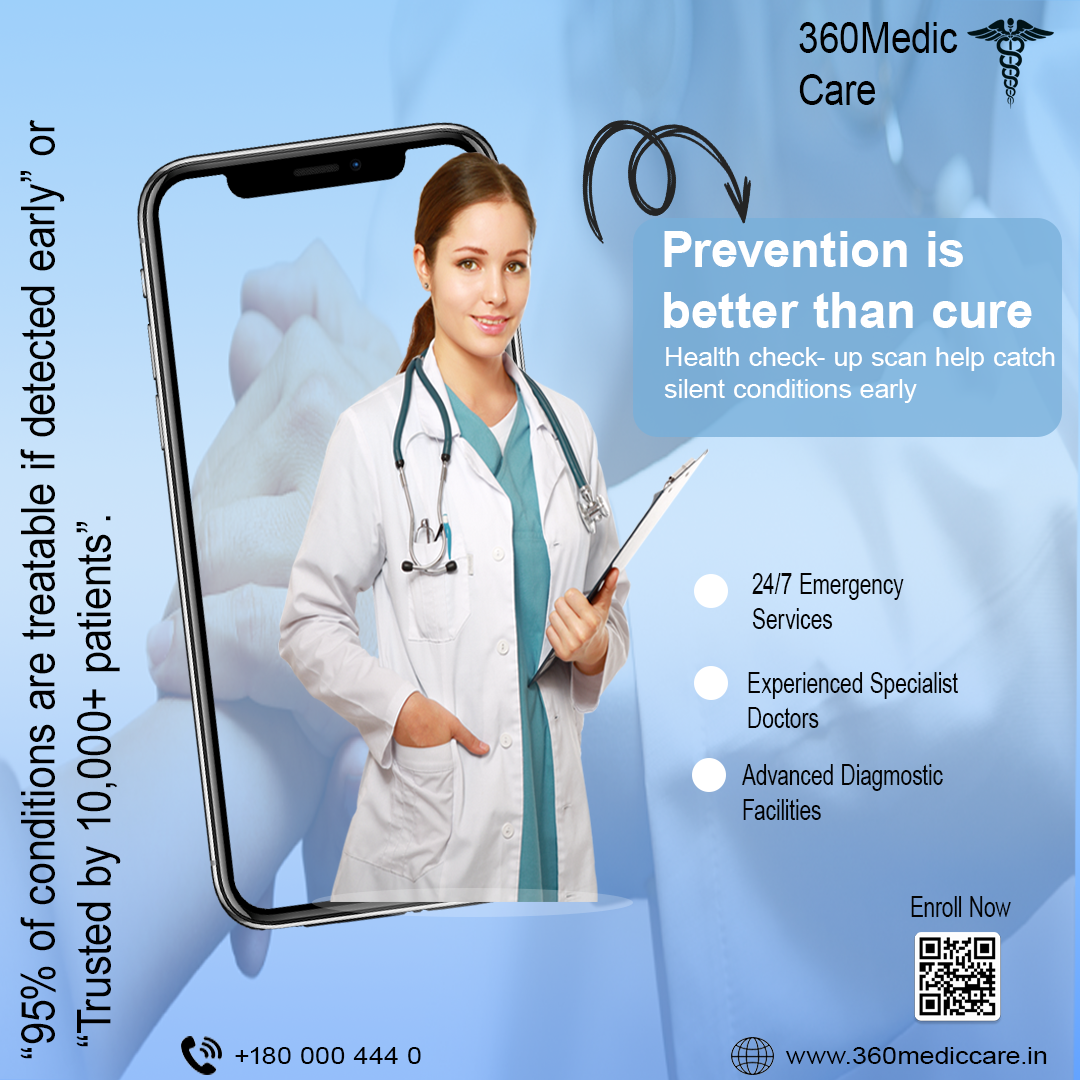
<style>
.page{position:relative;width:1080px;height:1080px}
.page>*{position:absolute;margin:0}
.t1{font:43.4px "ArialMT";letter-spacing:0.01em;color:#000000;scale:0.85 1}
.t2{font:46.9px "ArialMT";letter-spacing:0.01em;color:#000000;scale:0.88 1}
.t3{font:50.4px "Arial-BoldMT";letter-spacing:0.01em;color:#ffffff}
.t4{font:26.4px "ArialMT";letter-spacing:0.01em;color:#ffffff}
.t5{font:29px "ArialMT";letter-spacing:0.01em;color:#030303;scale:0.73 1}
.t6{font:23.5px "ArialMT";letter-spacing:0.01em;color:#000000;scale:1.14 1}
</style>
<div class="page">
<p class="t1" style="left:799px;top:22px;width:159px;height:83px">360Medic<br>Care</p>
<p class="t2" style="left:20px;top:119px;width:101px;height:940px;rotate:-90deg">“95% of conditions are treatable if detected early” or<br> “Trusted by 10,000+ patients”.</p>
<p class="t3" style="left:664px;top:231px;width:368px;height:97px">Prevention is<br>better than cure</p>
<p class="t4" style="left:664px;top:347px;width:391px;height:56px">Health check- up scan help catch<br>silent conditions early</p>
<p class="t5" style="left:752px;top:573px;width:152px;height:56px">24/7 Emergency <br>Services</p>
<p class="t5" style="left:748px;top:672px;width:210px;height:56px">Experienced Specialist<br>Doctors</p>
<p class="t5" style="left:742px;top:764px;width:201px;height:56px">Advanced Diagmostic<br>Facilities</p>
<p class="t5" style="left:911px;top:896px;width:100px;height:21px">Enroll Now</p>
<p class="t6" style="left:235px;top:1047px;width:186px;height:17px">+180 000 444 0</p>
<p class="t6" style="left:785px;top:1047px;width:262px;height:17px">www.360mediccare.in</p>
</div>
